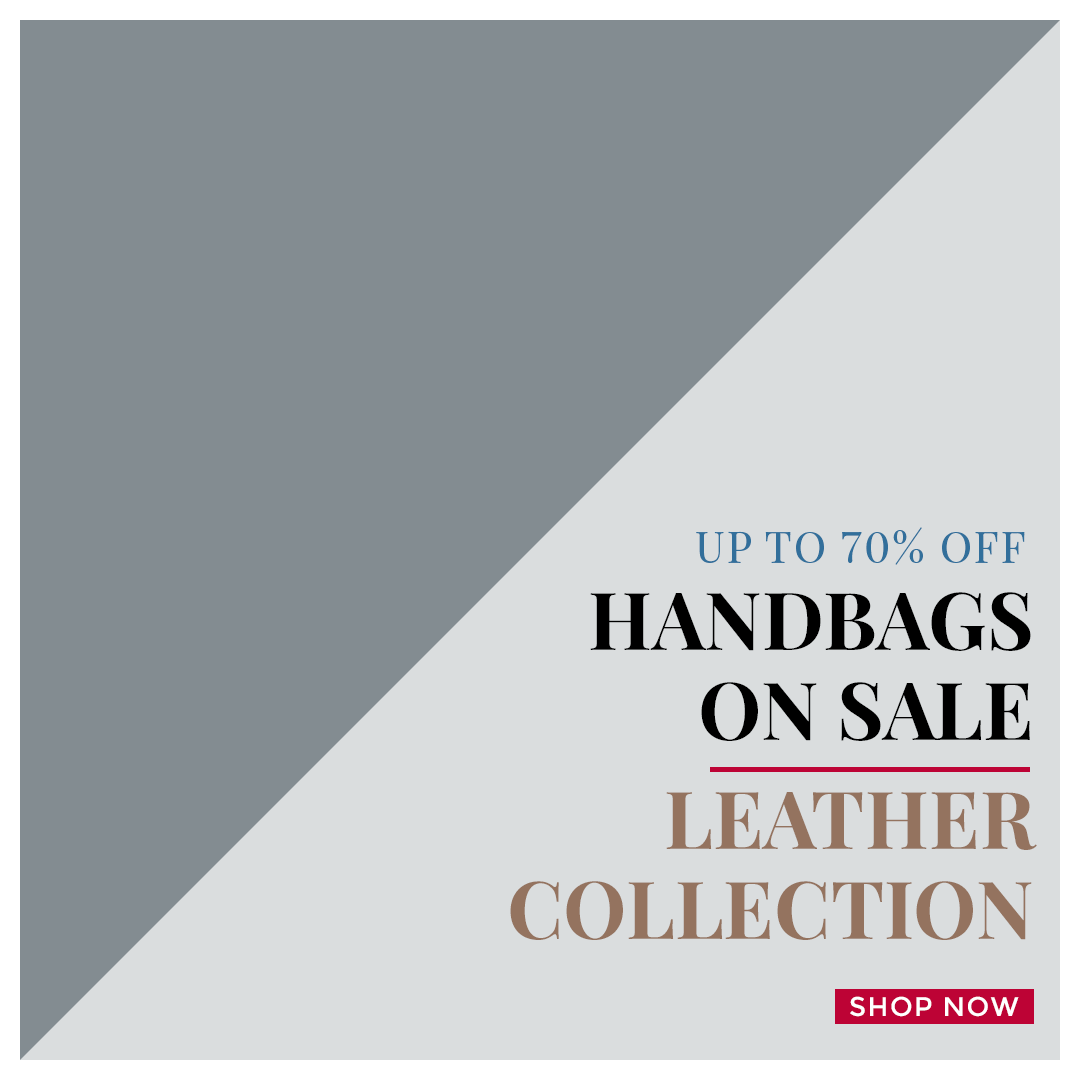
<style>
.page{position:relative;width:1080px;height:1080px;background:#838c91}
.page>*{position:absolute;margin:0}
.t1{font:43.3px "PlayfairDisplay-Regular";letter-spacing:0.05em;color:#326f9b;text-transform:uppercase}
.t2{font:80px/90px "PlayfairDisplay-Bold";color:#000000;text-transform:uppercase}
.t3{font:80px/90px "PlayfairDisplay-Bold";color:#94735f;text-transform:uppercase}
.t4{font:27px "Montserrat-Regular";letter-spacing:0.05em;color:#ffffff;text-transform:uppercase}
</style>
<div class="page">
<p class="t1" style="left:696px;top:527px;width:329px;height:38px">Up To 70% Off</p>
<p class="t2" style="left:590px;top:592px;width:441px;height:149px;text-align:right">Handbags<br>on Sale</p>
<p class="t3" style="left:510px;top:792px;width:527px;height:148px;text-align:right">Leather<br>Collection</p>
<p class="t4" style="left:850px;top:996px;width:169px;height:21px">Shop Now</p>
</div>
